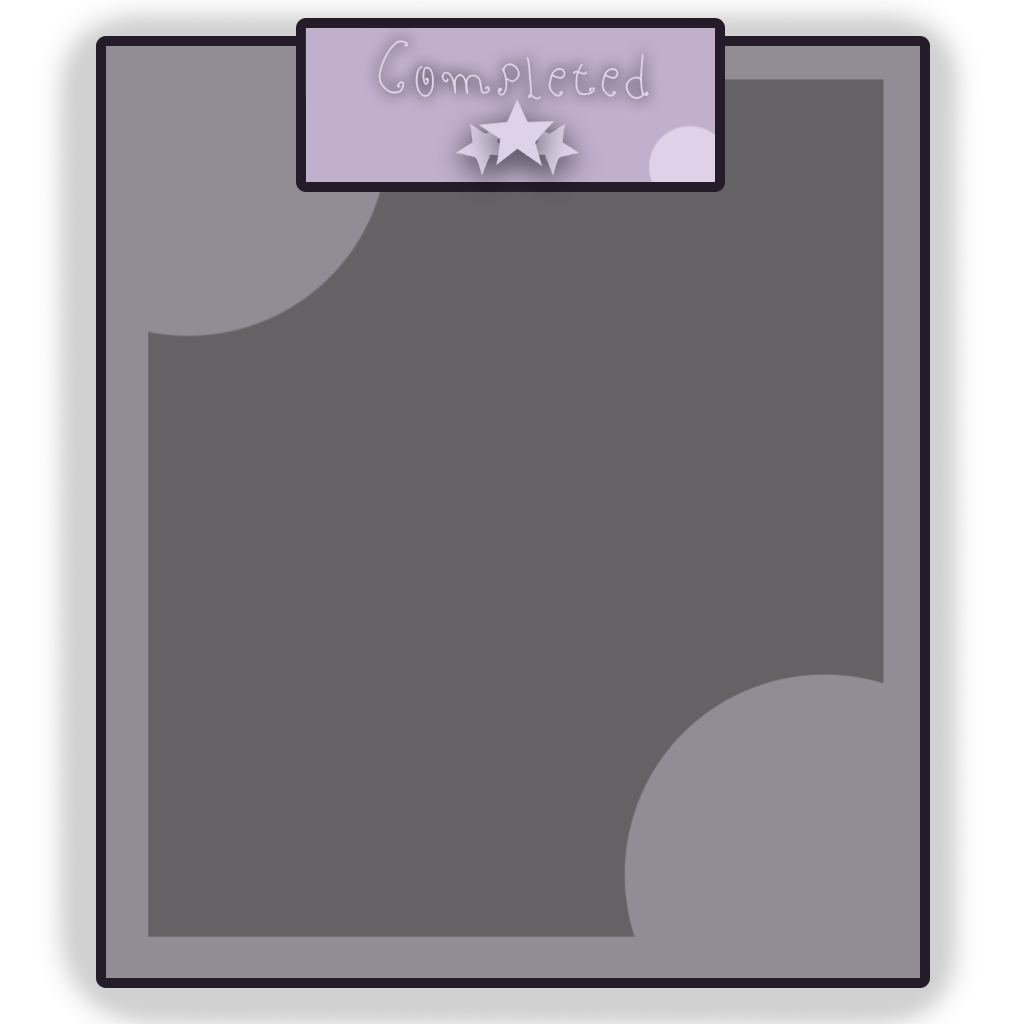
<style>
.page{position:relative;width:1024px;height:1024px;background:#646265}
.page>*{position:absolute;margin:0}
.t1{font:69px "Curviliniousfont-Regular";color:#dfd1e8}
</style>
<div class="page">
<p class="t1" style="left:378px;top:40px;width:271px;height:60px">Completed</p>
</div>
